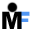
<style>
.page{position:relative;width:32px;height:32px;background:#ffffff}
.page>*{position:absolute;margin:0}
.t1{font:24px "Arial-Black";color:#000000}
</style>
<div class="page">
<p class="t1" style="left:2px;top:11px;width:20px;height:18px">M</p>
</div>
